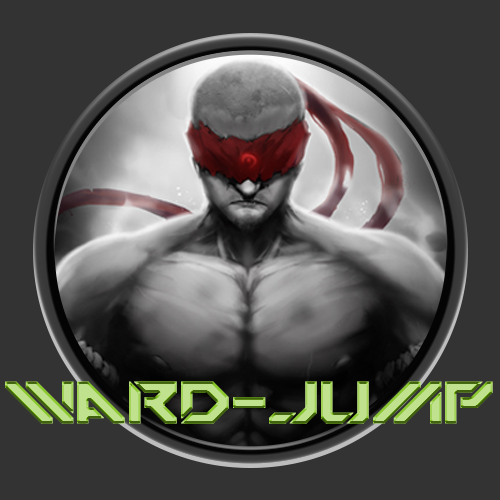
<style>
.page{position:relative;width:500px;height:500px;background:#333333}
.page>*{position:absolute;margin:0}
.t1{font:41.4px "Mechsuit";font-weight:bold}
</style>
<div class="page">
<p class="t1" style="left:5px;top:381px;width:488px;height:43px">Ward-Jump</p>
</div>
